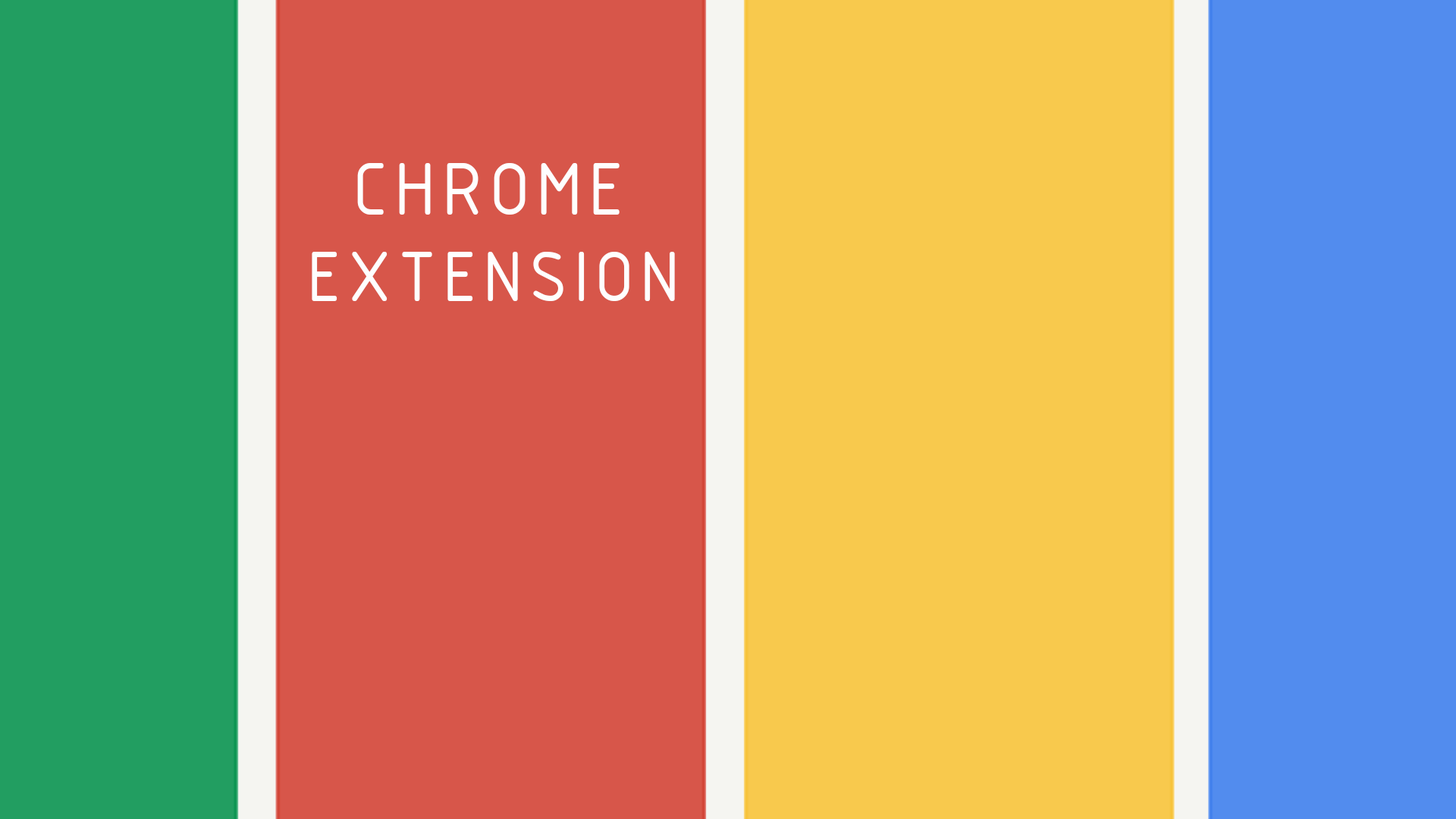
<style>
.page{position:relative;width:1456px;height:819px;background:#d7564a}
.page>*{position:absolute;margin:0}
.t1{font:79.7px "ISOCPEUR";letter-spacing:0.075em;color:#fefefe}
.t2{font:76.7px "ISOCPEUR";letter-spacing:0.075em;color:#fefefe}
</style>
<div class="page">
<p class="t1" style="left:357px;top:163px;width:263px;height:52px">CHROME</p>
<p class="t2" style="left:312px;top:252px;width:363px;height:49px">EXTENSION</p>
</div>
